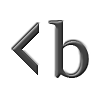
<style>
.page{position:relative;width:100px;height:100px;background:#ffffff}
.page>*{position:absolute;margin:0}
.t1{font:73.8px "Vani";color:#414141}
</style>
<div class="page">
<p class="t1" style="left:49px;top:21px;width:40px;height:57px">b</p>
</div>
